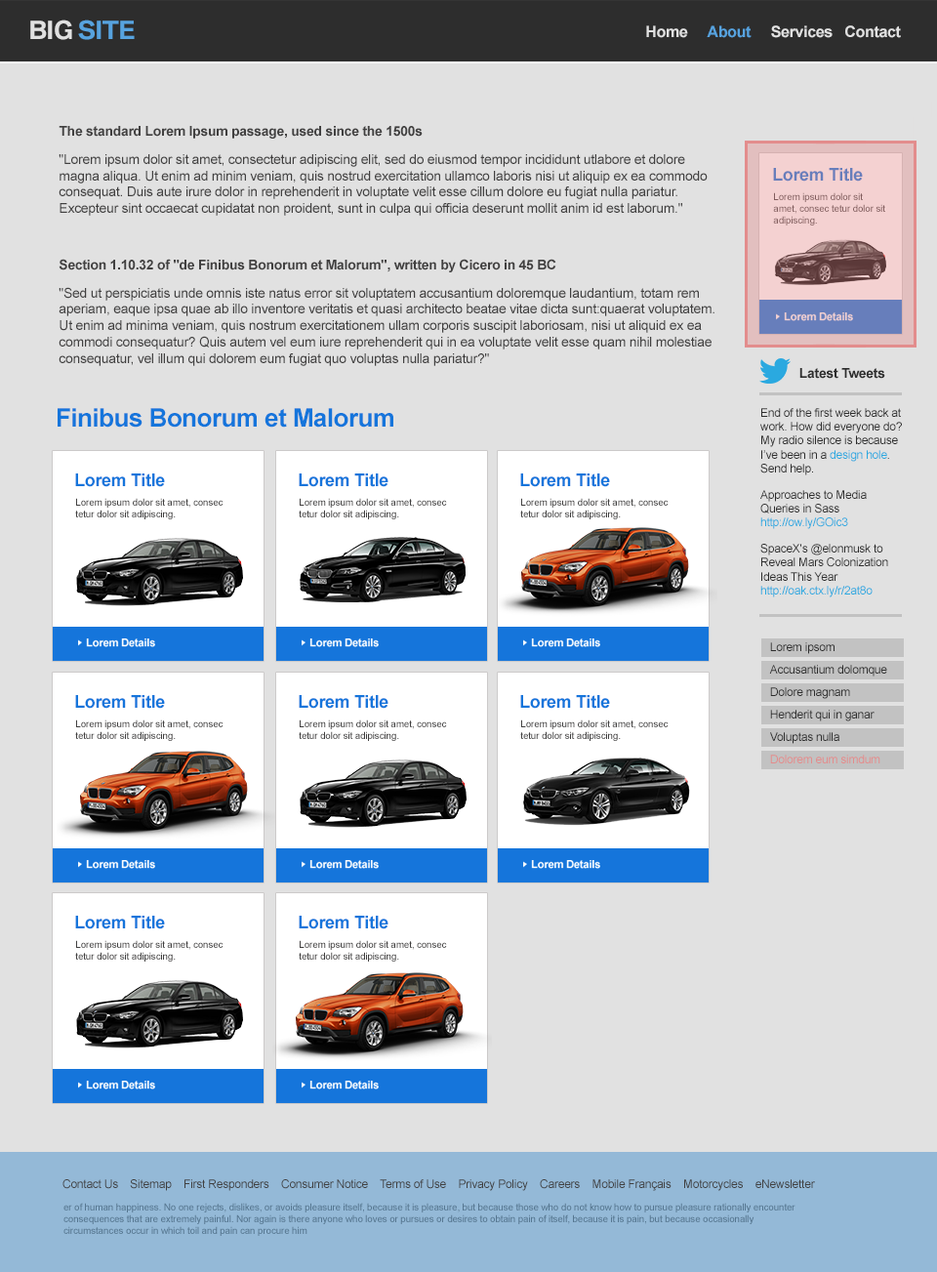
<style>
.page{position:relative;width:937px;height:1272px;background:#e1e1e1}
.page>*{position:absolute;margin:0}
.t1{font:24.4px "BMWTypeGlobalPro-Bold";letter-spacing:-0.02em;color:#57a3df;text-transform:uppercase}
.t2{font:24.4px "BMWTypeGlobalPro-Bold";letter-spacing:-0.02em;color:#e1e1e1;text-transform:uppercase}
.t3{font:15.6px "Arial-BoldMT";letter-spacing:-0.02em;color:#e1e1e1}
.t4{font:15.6px "Arial-BoldMT";letter-spacing:-0.02em;color:#57a3df}
.t5{font:13.7px "ArialMT";letter-spacing:-0.02em;color:#414040}
.t6{font:13.7px "Arial-BoldMT";letter-spacing:-0.02em;color:#414040}
.t7{font:17.6px "Arial-BoldMT";letter-spacing:-0.02em;color:#677ebb}
.t8{font:9.8px "ArialMT";letter-spacing:-0.02em;color:#825e5e}
.t9{font:13.7px "Arial-BoldMT";letter-spacing:-0.02em;color:#2d2d2d}
.t10{font:25.4px "Arial-BoldMT";letter-spacing:-0.02em;color:#1575db}
.t11{font:11.7px "ArialMT";letter-spacing:-0.02em;color:#2d2d2d}
.t12{font:11.7px "ArialMT";letter-spacing:-0.02em;color:#2aa9e0}
.t13{font:17.6px "Arial-BoldMT";letter-spacing:-0.02em;color:#1575db}
.t14{font:9.8px "ArialMT";letter-spacing:-0.02em;color:#414040}
.t15{font:11.7px "ArialMT";letter-spacing:-0.02em;color:#e38c8c}
.t16{font:11.7px "ArialMT";letter-spacing:-0.02em;color:#414040}
.t17{font:9.8px "ArialMT";letter-spacing:-0.02em;color:#567791}
</style>
<div class="page">
<p class="t1" style="left:30px;top:20px;width:105px;height:20px"><span class="t2">Big </span>Site</p>
<p class="t3" style="left:646px;top:25px;width:255px;height:13px">Home     <span class="t4">About</span>     Services   Contact</p>
<p class="t5" style="left:59px;top:126px;width:656px;height:240px"><span class="t6">The standard Lorem Ipsum passage, used since the 1500s<br></span>"Lorem ipsum dolor sit amet, consectetur adipiscing elit, sed do eiusmod tempor incididunt utlabore et dolore magna aliqua. Ut enim ad minim veniam, quis nostrud exercitation ullamco laboris nisi ut aliquip ex ea commodo consequat. Duis aute irure dolor in reprehenderit in voluptate velit esse cillum dolore eu fugiat nulla pariatur. Excepteur sint occaecat cupidatat non proident, sunt in culpa qui officia deserunt mollit anim id est laborum."<br><br><span class="t6">Section 1.10.32 of "de Finibus Bonorum et Malorum", written by Cicero in 45 BC<br></span>"Sed ut perspiciatis unde omnis iste natus error sit voluptatem accusantium doloremque laudantium, totam rem aperiam, eaque ipsa quae ab illo inventore veritatis et quasi architecto beatae vitae dicta sunt:quaerat voluptatem. Ut enim ad minima veniam, quis nostrum exercitationem ullam corporis suscipit laboriosam, nisi ut aliquid ex ea commodi consequatur? Quis autem vel eum iure reprehenderit qui in ea voluptate velit esse quam nihil molestiae consequatur, vel illum qui dolorem eum fugiat quo voluptas nulla pariatur?"</p>
<p class="t7" style="left:773px;top:168px;width:90px;height:14px">Lorem Title</p>
<p class="t8" style="left:773px;top:192px;width:113px;height:34px">Lorem ipsum dolor sit amet, consec tetur dolor sit adipiscing.</p>
<p class="t9" style="left:800px;top:368px;width:86px;height:11px">Latest Tweets</p>
<p class="t10" style="left:58px;top:408px;width:335px;height:20px">Finibus Bonorum et Malorum</p>
<p class="t11" style="left:761px;top:408px;width:141px;height:190px">End of the first week back at work. How did everyone do? My radio silence is because I’ve been in a <span class="t12">design hole</span>. Send help.<br>Approaches to Media Queries in Sass <span class="t12">http://ow.ly/GOic3 <br></span>SpaceX's @elonmusk to Reveal Mars Colonization Ideas This Year <span class="t12">http://oak.ctx.ly/r/2at8o</span></p>
<p class="t13" style="left:75px;top:474px;width:90px;height:13px">Lorem Title</p>
<p class="t13" style="left:299px;top:474px;width:90px;height:13px">Lorem Title</p>
<p class="t13" style="left:520px;top:474px;width:90px;height:13px">Lorem Title</p>
<p class="t14" style="left:75px;top:498px;width:149px;height:21px">Lorem ipsum dolor sit amet, consec tetur dolor sit adipiscing.</p>
<p class="t14" style="left:299px;top:498px;width:148px;height:21px">Lorem ipsum dolor sit amet, consec tetur dolor sit adipiscing.</p>
<p class="t14" style="left:520px;top:498px;width:149px;height:21px">Lorem ipsum dolor sit amet, consec tetur dolor sit adipiscing.</p>
<p class="t11" style="left:770px;top:642px;width:65px;height:12px">Lorem ipsom</p>
<p class="t11" style="left:769px;top:665px;width:119px;height:12px">Accusantium dolomque</p>
<p class="t11" style="left:770px;top:687px;width:80px;height:12px">Dolore magnam</p>
<p class="t13" style="left:75px;top:695px;width:90px;height:14px">Lorem Title</p>
<p class="t13" style="left:299px;top:695px;width:90px;height:14px">Lorem Title</p>
<p class="t13" style="left:520px;top:695px;width:90px;height:14px">Lorem Title</p>
<p class="t11" style="left:770px;top:710px;width:105px;height:12px">Henderit qui in ganar</p>
<p class="t14" style="left:75px;top:720px;width:149px;height:21px">Lorem ipsum dolor sit amet, consec tetur dolor sit adipiscing.</p>
<p class="t14" style="left:299px;top:720px;width:148px;height:21px">Lorem ipsum dolor sit amet, consec tetur dolor sit adipiscing.</p>
<p class="t14" style="left:520px;top:720px;width:149px;height:21px">Lorem ipsum dolor sit amet, consec tetur dolor sit adipiscing.</p>
<p class="t11" style="left:770px;top:732px;width:70px;height:12px">Voluptas nulla</p>
<p class="t15" style="left:770px;top:755px;width:111px;height:9px">Dolorem eum simdum</p>
<p class="t13" style="left:75px;top:916px;width:90px;height:13px">Lorem Title</p>
<p class="t13" style="left:299px;top:916px;width:90px;height:13px">Lorem Title</p>
<p class="t14" style="left:75px;top:940px;width:149px;height:22px">Lorem ipsum dolor sit amet, consec tetur dolor sit adipiscing.</p>
<p class="t14" style="left:299px;top:940px;width:148px;height:22px">Lorem ipsum dolor sit amet, consec tetur dolor sit adipiscing.</p>
<p class="t16" style="left:62px;top:1179px;width:753px;height:12px">Contact Us    Sitemap    First Responders    Consumer Notice    Terms of Use    Privacy Policy    Careers    Mobile Français    Motorcycles    eNewsletter</p>
<p class="t17" style="left:63px;top:1203px;width:733px;height:33px">er of human happiness. No one rejects, dislikes, or avoids pleasure itself, because it is pleasure, but because those who do not know how to pursue pleasure rationally encounter consequences that are extremely painful. Nor again is there anyone who loves or pursues or desires to obtain pain of itself, because it is pain, but because occasionally circumstances occur in which toil and pain can procure him</p>
</div>
